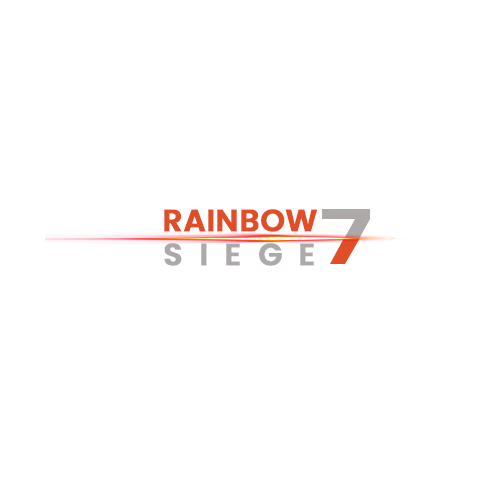
<style>
.page{position:relative;width:500px;height:500px;background:#ffffff}
.page>*{position:absolute;margin:0}
.t1{font:30.8px "Poppins-SemiBold";color:#df4e27;font-weight:bold}
.t2{font:30.8px "Poppins-SemiBold";letter-spacing:0.52em;color:#aea9a9;font-weight:bold}
</style>
<div class="page">
<p class="t1" style="left:164px;top:209px;width:153px;height:23px">RAINBOW</p>
<p class="t2" style="left:164px;top:243px;width:150px;height:23px">SIEGE</p>
</div>
